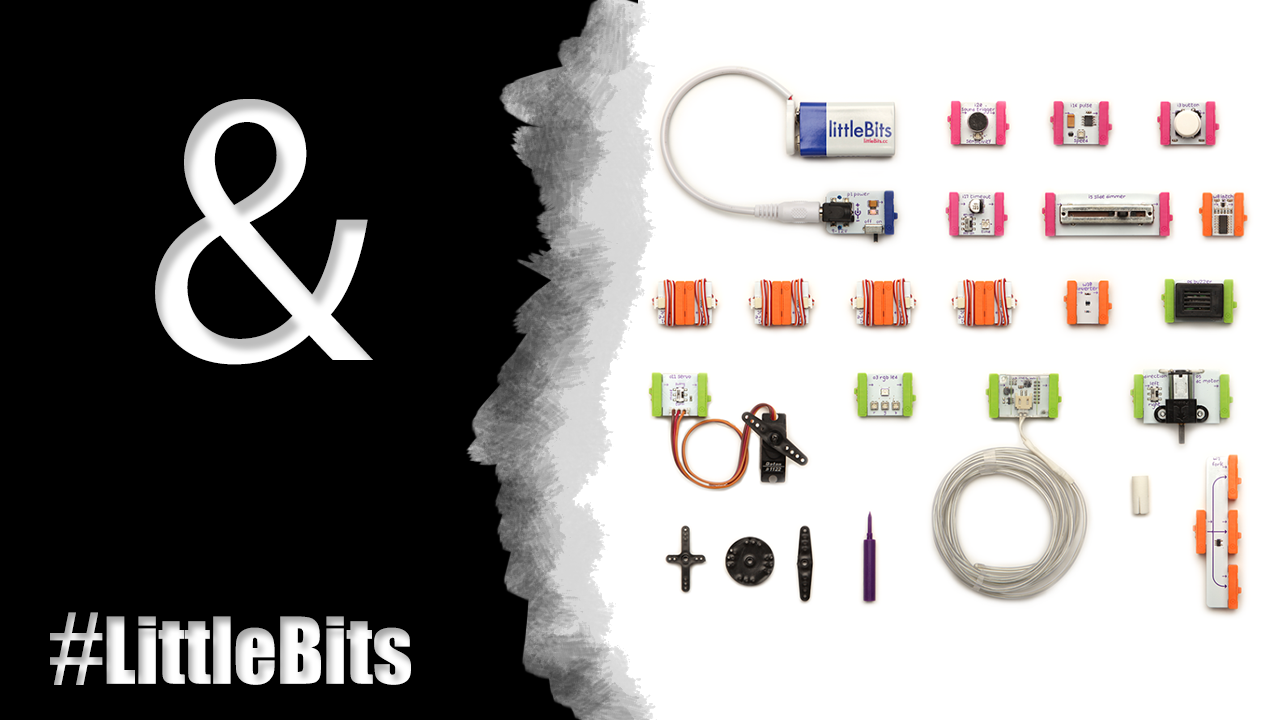
<style>
.page{position:relative;width:1280px;height:720px;background:#ffffff}
.page>*{position:absolute;margin:0}
.t1{font:381px "MyriadPro-Regular";color:#ffffff}
.t2{font:84.7px "Impact"}
.t3{font:97.4px "ArialMT"}
</style>
<div class="page">
<p class="t1" style="left:155px;top:99px;width:218px;height:266px">&amp;</p>
<p class="t2" style="left:50px;top:612px;width:361px;height:73px"><span class="t3">#</span>LittleBits</p>
</div>
